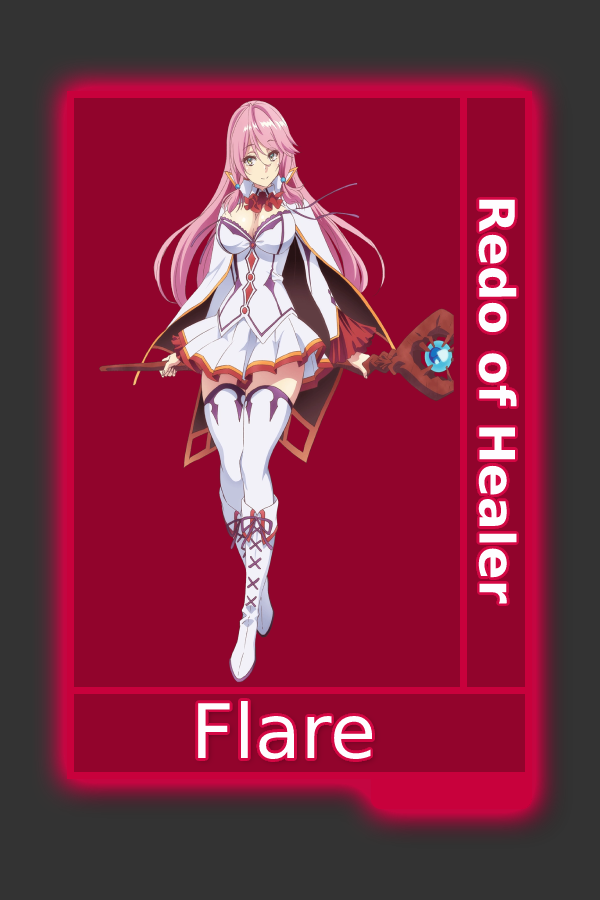
<style>
.page{position:relative;width:600px;height:900px;background:#91042c}
.page>*{position:absolute;margin:0}
.t1{font:48.8px "MADETOMMY-Bold";color:#fefdff}
.t2{font:75px "CoolveticaRg-Regular";color:#fefdff}
</style>
<div class="page">
<p class="t1" style="left:478px;top:199px;width:39px;height:405px;rotate:90deg">Redo of Healer</p>
<p class="t2" style="left:198px;top:701px;width:175px;height:59px">Flare</p>
</div>
